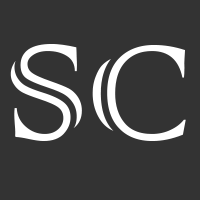
<style>
.page{position:relative;width:200px;height:200px;background:#333333}
.page>*{position:absolute;margin:0}
.t1{font:179.7px "ColonnaMT";color:#ffffff}
</style>
<div class="page">
<p class="t1" style="left:10px;top:44px;width:176px;height:97px">SC</p>
</div>
